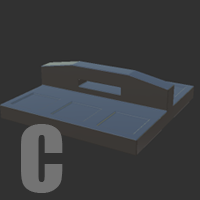
<style>
.page{position:relative;width:200px;height:200px;background:#313131}
.page>*{position:absolute;margin:0}
.t1{font:85.1px "Impact";color:#737373}
</style>
<div class="page">
<p class="t1" style="left:21px;top:124px;width:42px;height:69px">C</p>
</div>
